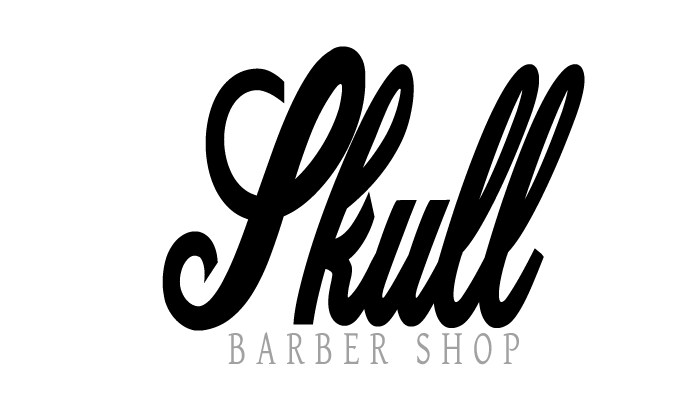
<style>
.page{position:relative;width:700px;height:400px;background:#ffffff}
.page>*{position:absolute;margin:0}
.t1{font:300px "DattermatterBoldPersoinalUse-Re";letter-spacing:-0.01em;color:#000000;scale:0.67 1}
.t2{font:50px "DavidLibre-Regular";letter-spacing:0.3em;color:#a1a1a1;scale:0.67 1}
</style>
<div class="page">
<p class="t1" style="left:162px;top:46px;width:423px;height:285px">Skull</p>
<p class="t2" style="left:228px;top:331px;width:291px;height:34px">BARBER SHOP</p>
</div>
